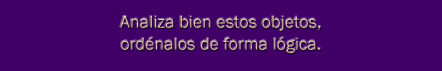
<style>
.page{position:relative;width:442px;height:71px;background:#400068}
.page>*{position:absolute;margin:0}
.t1{font:18px/22.2px "FranklinGothic-Book";color:#d4c088}
</style>
<div class="page">
<p class="t1" style="left:120px;top:16px;width:201px;height:38px;text-align:center">Analiza bien estos objetos, <br>ordénalos de forma lógica.</p>
</div>
